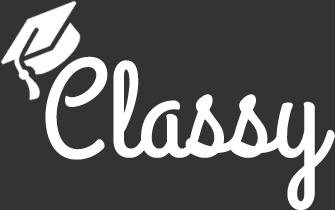
<style>
.page{position:relative;width:335px;height:210px;background:#333333}
.page>*{position:absolute;margin:0}
.t1{font:136px "GrandHotel-Regular";color:#ffffff}
</style>
<div class="page">
<p class="t1" style="left:45px;top:56px;width:290px;height:154px">Classy</p>
</div>
